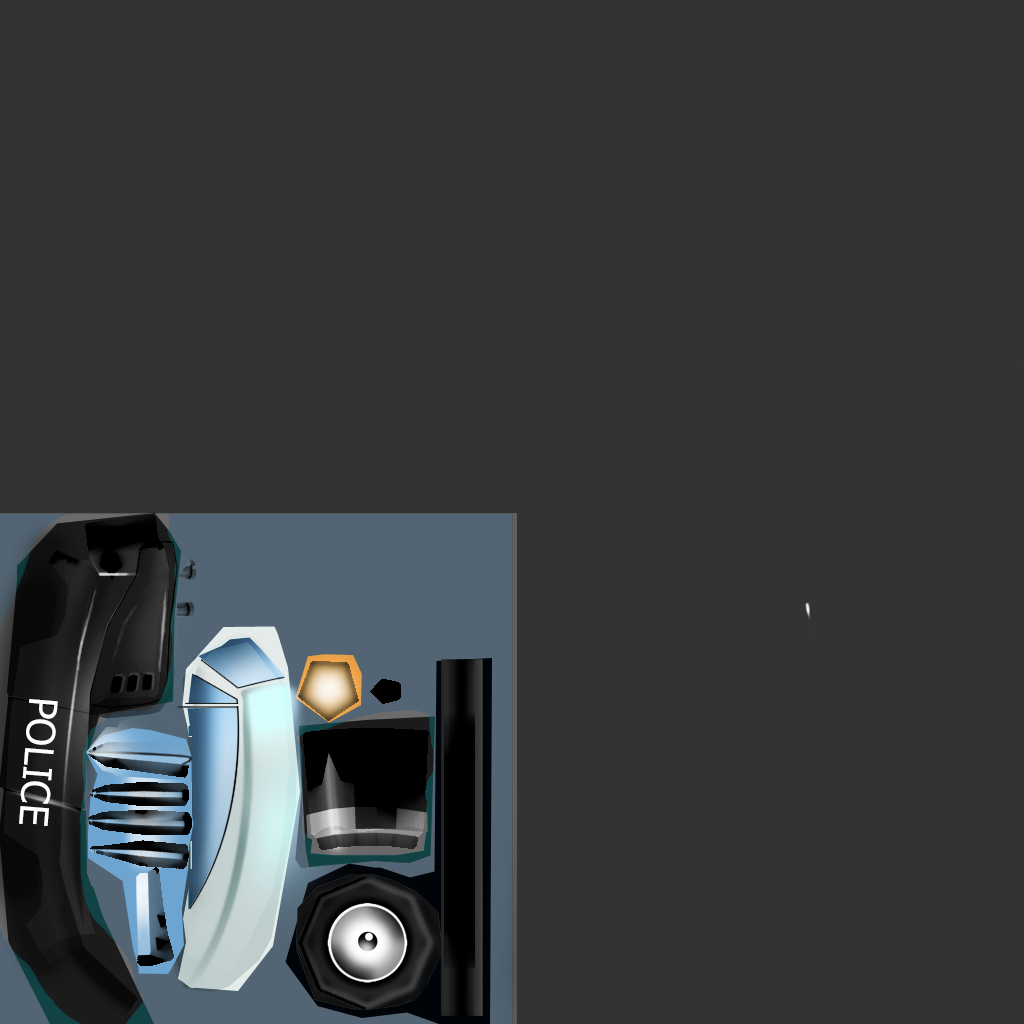
<style>
.page{position:relative;width:1024px;height:1024px;background:#333333}
.page>*{position:absolute;margin:0}
.t1{font:39.5px "Tahoma";color:#ffffff}
</style>
<div class="page">
<p class="t1" style="left:19px;top:699px;width:39px;height:127px;rotate:95deg">POLICE</p>
</div>
